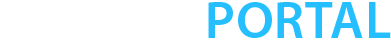
<style>
.page{position:relative;width:391px;height:40px;background:#ffffff}
.page>*{position:absolute;margin:0}
.t1{font:53px "MyriadPro-Semibold";color:#25bfff;text-transform:uppercase}
.t2{font:53px "MyriadPro-Semibold";color:#ffffff;text-transform:uppercase}
</style>
<div class="page">
<p class="t1" style="left:51px;top:2px;width:340px;height:36px"><span class="t2">MUSIC</span>portal</p>
</div>
